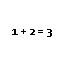
<style>
.page{position:relative;width:64px;height:64px;background:#ffffff}
.page>*{position:absolute;margin:0}
.t1{font:12.3px "Corbel-Bold";color:#000000}
</style>
<div class="page">
<p class="t1" style="left:12px;top:29px;width:40px;height:8px">1 + 2 = 3</p>
</div>
